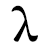
<style>
.page{position:relative;width:48px;height:48px;background:#ffffff}
.page>*{position:absolute;margin:0}
.t1{font:50px "EBGaramondRoman-SemiBold";color:#000000}
</style>
<div class="page">
<p class="t1" style="left:11px;top:5px;width:27px;height:37px">λ</p>
</div>
